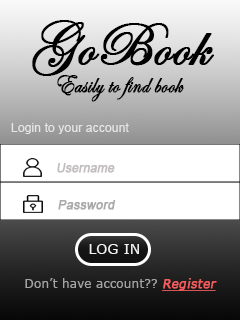
<style>
.page{position:relative;width:240px;height:320px;background:#ffffff}
.page>*{position:absolute;margin:0}
.t1{font:60.1px "EdwardianScriptITC";color:#000000;font-weight:bold}
.t2{font:28.4px "EdwardianScriptITC";color:#000000;font-weight:bold;scale:0.79 1}
.t3{font:12.3px "ArialMT";color:#e6e6e6}
.t4{font:12px "ArialMT";color:#c3bfbf;font-weight:bold;font-style:italic}
.t5{font:12.3px "ArialMT";color:#aaaaaa;font-weight:bold;font-style:italic}
.t6{font:14.3px "Verdana";color:#f2f2f2}
.t7{font:12.3px "Verdana";color:#a4a4a4}
.t8{font:12.3px "Verdana";color:#f55d5d;font-weight:bold;font-style:italic;text-decoration:underline}
</style>
<div class="page">
<p class="t1" style="left:32px;top:20px;width:182px;height:56px">GoBook</p>
<p class="t2" style="left:57px;top:75px;width:127px;height:27px">Easily to find book</p>
<p class="t3" style="left:11px;top:123px;width:118px;height:11px">Login to your account</p>
<p class="t4" style="left:57px;top:163px;width:58px;height:10px">Username</p>
<p class="t5" style="left:58px;top:200px;width:58px;height:10px">Password</p>
<p class="t6" style="left:89px;top:244px;width:50px;height:10px">LOG IN</p>
<p class="t7" style="left:25px;top:278px;width:192px;height:13px">Don’t have account?? <span class="t8">Register</span></p>
</div>
